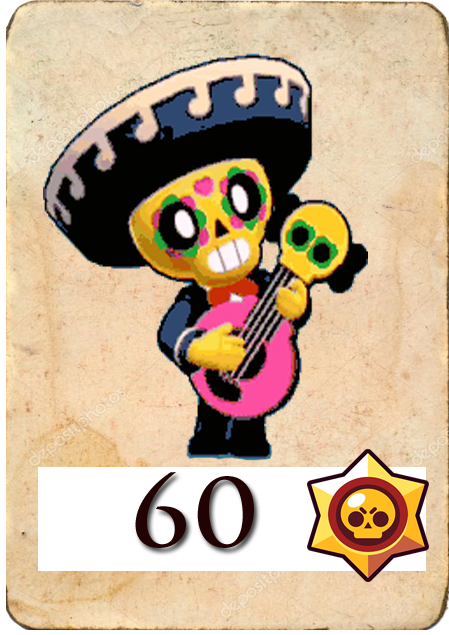
<style>
.page{position:relative;width:449px;height:635px}
.page>*{position:absolute;margin:0}
.t1{font:100px "CharlemagneStd-Bold";color:#210303}
</style>
<div class="page">
<p class="t1" style="left:135px;top:472px;width:119px;height:76px">60</p>
</div>
